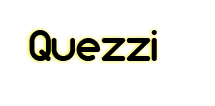
<style>
.page{position:relative;width:215px;height:106px;background:#ffffff}
.page>*{position:absolute;margin:0}
.t1{font:48px "zAristaLight";color:#000000}
</style>
<div class="page">
<p class="t1" style="left:29px;top:30px;width:128px;height:31px">Quezzi</p>
</div>
